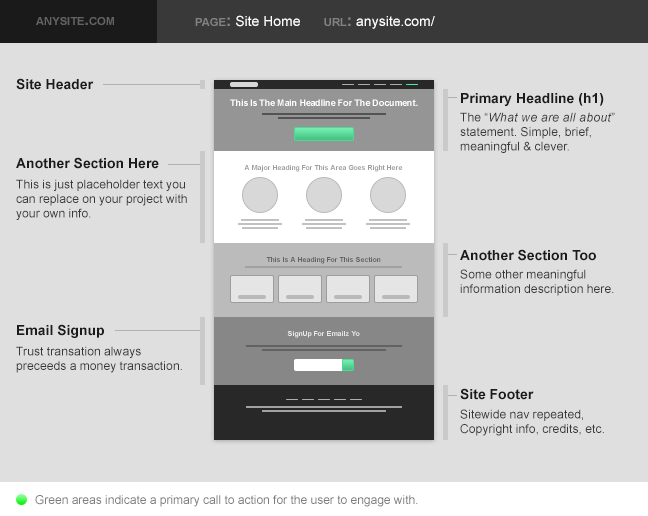
<style>
.page{position:relative;width:648px;height:516px;background:#dfdfdf}
.page>*{position:absolute;margin:0}
.t1{font:16px "Arial-BoldMT";color:#636363;font-variant:small-caps}
.t2{font:14px "ArialMT";color:#ffffff}
.t3{font:16px "Arial-BoldMT";color:#838383;font-variant:small-caps}
.t4{font:14px "Arial-BoldMT";color:#1b1b1b}
.t5{font:12px "ArialMT";color:#383838}
.t6{font:12px "Arial-ItalicMT";letter-spacing:0.02em;color:#383838}
.t7{font:12px "ArialMT";color:#7d7d7d}
</style>
<div class="page">
<p class="t1" style="left:36px;top:17px;width:78px;height:8px">anysite.com</p>
<p class="t2" style="left:195px;top:15px;width:240px;height:14px"><span class="t3">page: </span>Site Home      <span class="t3">url: </span>anysite.com/</p>
<p class="t4" style="left:16px;top:78px;width:78px;height:12px">Site Header</p>
<p class="t4" style="left:461px;top:93px;width:143px;height:13px">Primary Headline (h1)</p>
<p class="t5" style="left:460px;top:112px;width:155px;height:41px">The “<span class="t6">What we are all about</span>” statement. Simple, brief, meaningful &amp; clever.</p>
<p class="t4" style="left:16px;top:157px;width:143px;height:12px">Another Section Here</p>
<p class="t5" style="left:16px;top:179px;width:171px;height:41px">This is just placeholder text you can replace on your project with your own info.</p>
<p class="t4" style="left:460px;top:249px;width:136px;height:12px">Another Section Too</p>
<p class="t5" style="left:460px;top:269px;width:154px;height:27px">Some other meaningful information description here.</p>
<p class="t4" style="left:17px;top:324px;width:87px;height:14px">Email Signup</p>
<p class="t5" style="left:16px;top:346px;width:166px;height:27px">Trust transation always preceeds a money transaction.</p>
<p class="t4" style="left:460px;top:388px;width:74px;height:12px">Site Footer</p>
<p class="t5" style="left:460px;top:409px;width:144px;height:27px">Sitewide nav repeated, Copyright info, credits, etc.</p>
<p class="t7" style="left:35px;top:495px;width:383px;height:12px">Green areas indicate a primary call to action for the user to engage with.</p>
</div>
